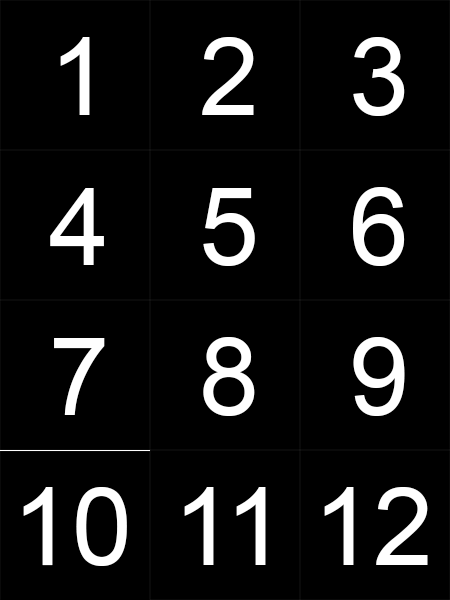
<style>
.page{position:relative;width:450px;height:600px;background:#000000}
.page>*{position:absolute;margin:0}
.t1{font:108px "ArialMT";color:#ffffff}
</style>
<div class="page">
<p class="t1" style="left:60px;top:37px;width:30px;height:78px">1</p>
<p class="t1" style="left:202px;top:37px;width:52px;height:78px">2</p>
<p class="t1" style="left:353px;top:37px;width:52px;height:79px">3</p>
<p class="t1" style="left:50px;top:188px;width:54px;height:77px">4</p>
<p class="t1" style="left:203px;top:188px;width:52px;height:78px">5</p>
<p class="t1" style="left:353px;top:187px;width:52px;height:79px">6</p>
<p class="t1" style="left:54px;top:338px;width:51px;height:77px">7</p>
<p class="t1" style="left:203px;top:337px;width:52px;height:79px">8</p>
<p class="t1" style="left:353px;top:337px;width:52px;height:79px">9</p>
<p class="t1" style="left:23px;top:487px;width:104px;height:79px">10</p>
<p class="t1" style="left:184px;top:487px;width:82px;height:78px">11</p>
<p class="t1" style="left:324px;top:487px;width:104px;height:78px">12</p>
</div>
